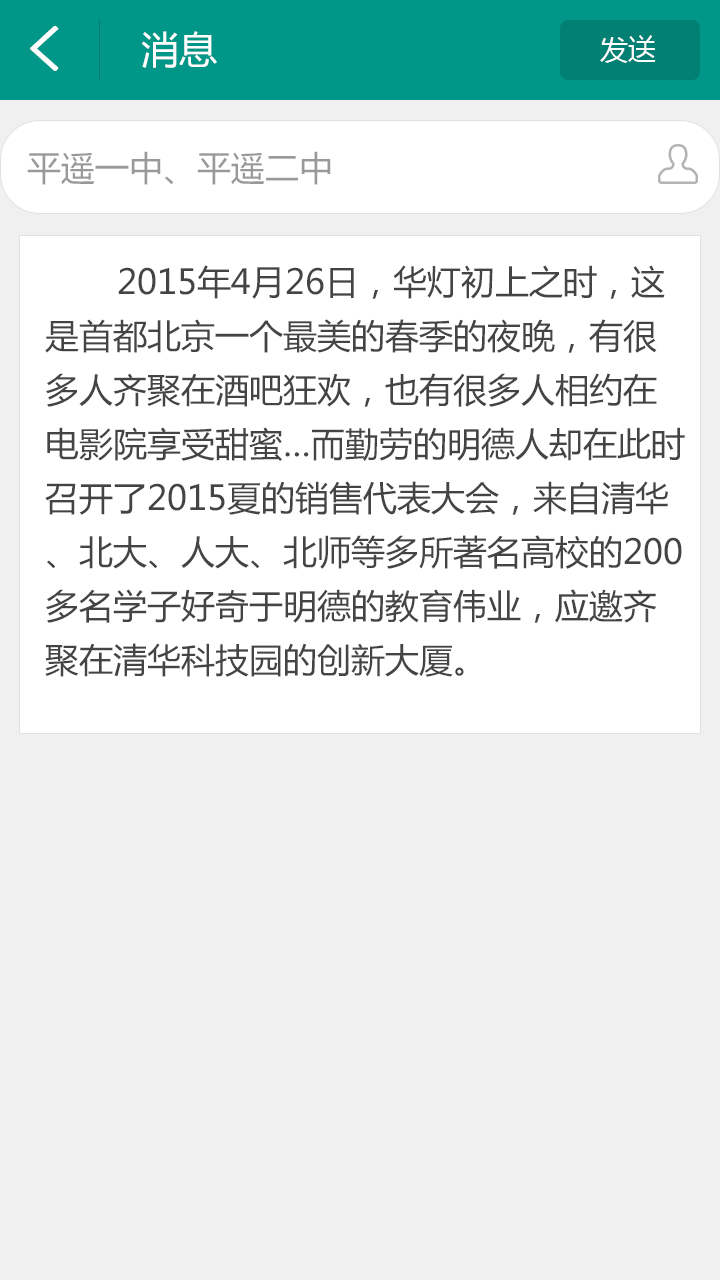
<style>
.page{position:relative;width:720px;height:1280px;background:#f0f0f0}
.page>*{position:absolute;margin:0}
.t1{font:62px "SimHei";color:#ffffff;font-weight:bold}
.t2{font:38px "MicrosoftYaHei";color:#ffffff}
.t3{font:28px "MicrosoftYaHei";color:#ffffff}
.t4{font:34px "MicrosoftYaHei";color:#999999}
.t5{font:34px/54px "MicrosoftYaHei";color:#444444}
</style>
<div class="page">
<p class="t1" style="left:30px;top:26px;width:29px;height:45px">&lt;</p>
<p class="t2" style="left:141px;top:31px;width:76px;height:37px">消息</p>
<p class="t3" style="left:600px;top:35px;width:56px;height:28px">发送</p>
<p class="t4" style="left:27px;top:151px;width:304px;height:34px">平遥一中、平遥二中</p>
<p class="t5" style="left:45px;top:265px;width:640px;height:412px">2015年4月26日，华灯初上之时，这是首都北京一个最美的春季的夜晚，有很多人齐聚在酒吧狂欢，也有很多人相约在电影院享受甜蜜…而勤劳的明德人却在此时召开了2015夏的销售代表大会，来自清华、北大、人大、北师等多所著名高校的200多名学子好奇于明德的教育伟业，应邀齐聚在清华科技园的创新大厦。</p>
</div>
